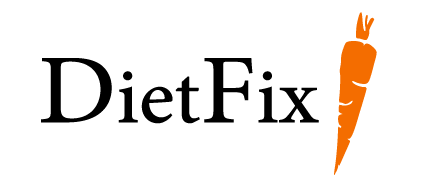
<style>
.page{position:relative;width:424px;height:192px;background:#ffffff}
.page>*{position:absolute;margin:0}
.t1{font:163.2px "font3836";color:#f46d00;scale:0.64 1}
.t2{font:110.7px "AdobeArabic-Regular";color:#000000}
.t3{font:138.4px "AdobeArabic-Regular";color:#000000}
</style>
<div class="page">
<p class="t1" style="left:334px;top:12px;width:43px;height:163px;rotate:25deg">c</p>
<p class="t2" style="left:41px;top:58px;width:278px;height:66px"><span class="t3">D</span>iet<span class="t3">F</span>ix</p>
</div>
